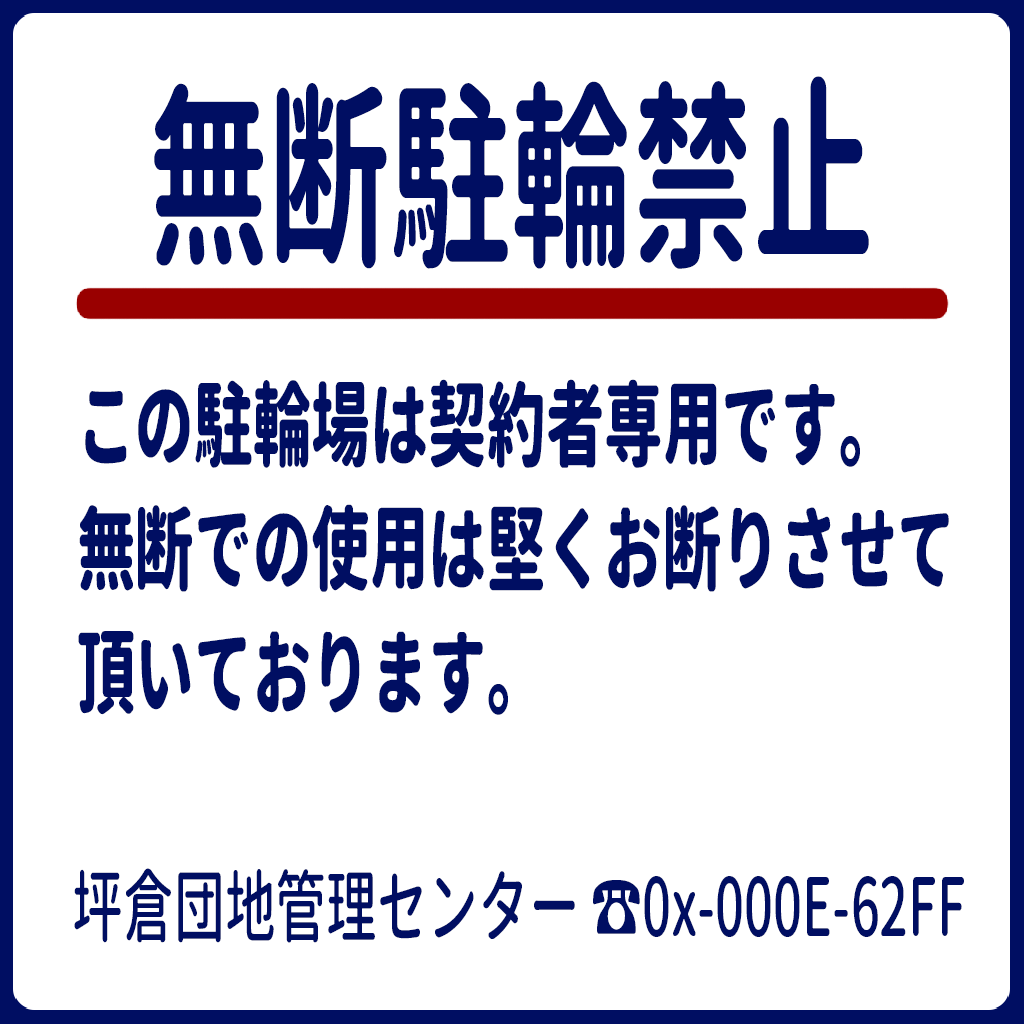
<style>
.page{position:relative;width:1024px;height:1024px;background:#ffffff}
.page>*{position:absolute;margin:0}
.t1{font:200.4px "GenJyuuGothic-Bold";color:#000e62;scale:0.6 1}
.t2{font:92.4px/124px "GenJyuuGothic-Heavy";color:#000e62;scale:0.63 1}
.t3{font:80px "GenJyuuGothic-Medium";color:#000e62;scale:0.63 1}
</style>
<div class="page">
<p class="t1" style="left:154px;top:76px;width:715px;height:193px">無断駐輪禁止</p>
<p class="t2" style="left:78px;top:379px;width:871px;height:336px">この駐輪場は契約者専用です。<br>無断での使用は堅くお断りさせて<br>頂いております。</p>
<p class="t3" style="left:74px;top:868px;width:890px;height:75px">坪倉団地管理センター ☎0x-000E-62FF</p>
</div>
